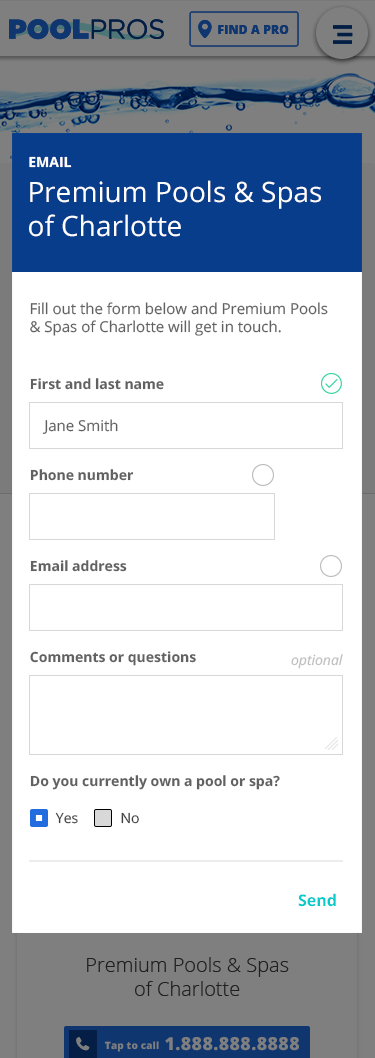
<style>
.page{position:relative;width:375px;height:1058px;background:#ffffff}
.page>*{position:absolute;margin:0}
.t1{font:14px "OpenSans-Bold";color:#ffffff}
.t2{font:28px "OpenSans";color:#ffffff}
.t3{font:15px "OpenSans";color:#616161}
.t4{font:14px "OpenSans-Bold";color:#616161}
.t5{font:14px "OpenSans-Italic";color:#bebebe}
.t6{font:14px "OpenSans";color:#3f3f3f}
.t7{font:16px "OpenSans-Bold";color:#0bc9c8}
</style>
<div class="page">
<p class="t1" style="left:29px;top:156px;width:43px;height:12px">EMAIL</p>
<p class="t2" style="left:29px;top:180px;width:292px;height:57px">Premium Pools &amp; Spas of Charlotte</p>
<p class="t3" style="left:30px;top:302px;width:298px;height:34px">Fill out the form below and Premium Pools &amp; Spas of Charlotte will get in touch.</p>
<p class="t4" style="left:30px;top:378px;width:134px;height:12px">First and last name</p>
<p class="t3" style="left:42px;top:419px;width:76px;height:15px">Jane Smith</p>
<p class="t4" style="left:30px;top:469px;width:104px;height:12px">Phone number</p>
<p class="t4" style="left:30px;top:560px;width:97px;height:12px">Email address</p>
<p class="t4" style="left:30px;top:651px;width:166px;height:15px">Comments or questions</p>
<p class="t5" style="left:291px;top:654px;width:52px;height:15px">optional</p>
<p class="t4" style="left:30px;top:775px;width:250px;height:15px">Do you currently own a pool or spa?</p>
<p class="t6" style="left:55px;top:812px;width:23px;height:12px">Yes</p>
<p class="t6" style="left:121px;top:812px;width:18px;height:12px">No</p>
<p class="t7" style="left:298px;top:893px;width:38px;height:14px">Send</p>
</div>
